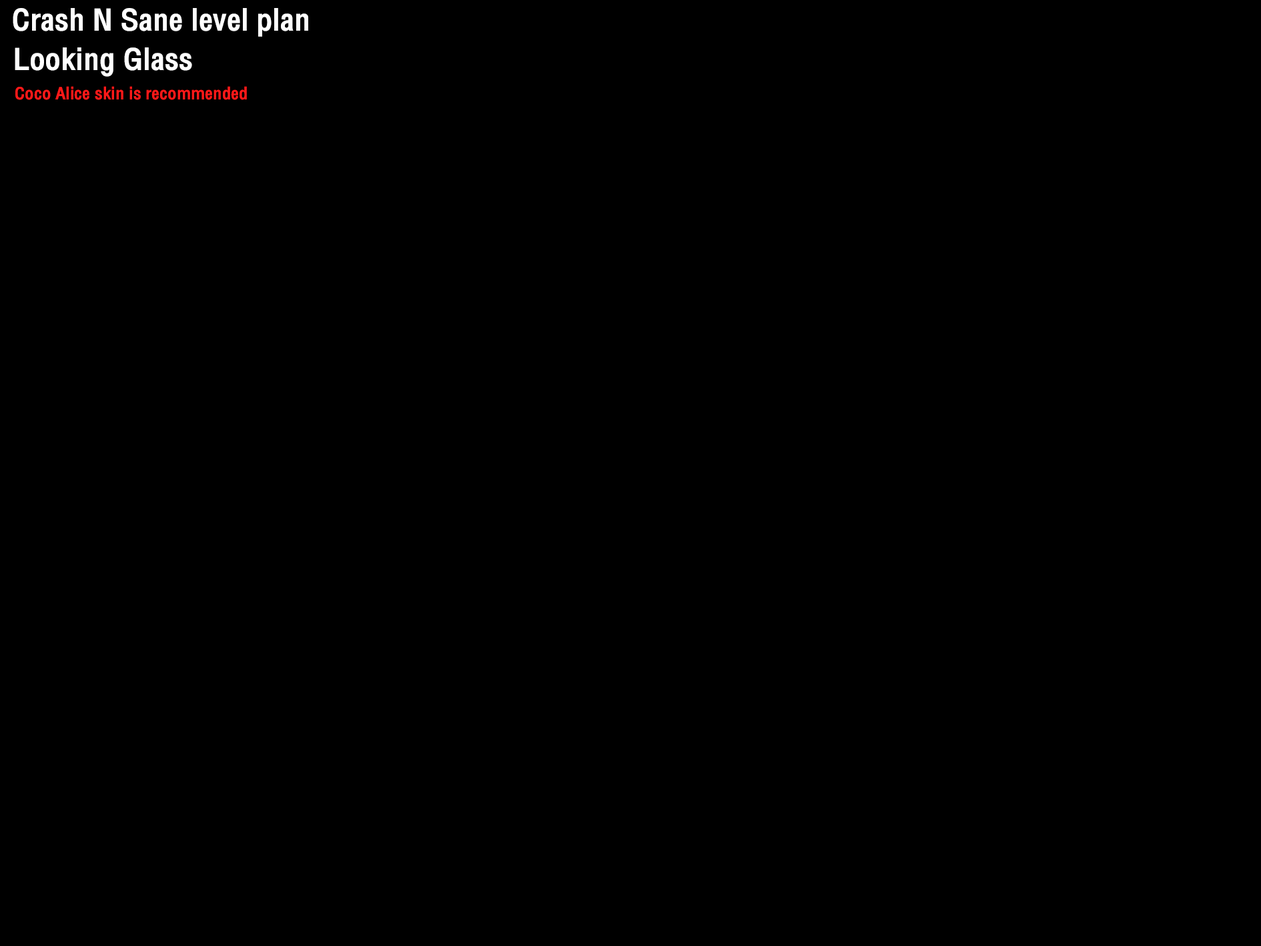
<style>
.page{position:relative;width:1261px;height:946px;background:#000000}
.page>*{position:absolute;margin:0}
.t1{font:44.5px "DBHeavent-BoldCond";color:#ffffff}
.t2{font:25px "DBHeavent-BoldCond";color:#ff1919}
</style>
<div class="page">
<p class="t1" style="left:13px;top:8px;width:295px;height:29px">Crash N Sane level plan</p>
<p class="t1" style="left:15px;top:47px;width:177px;height:30px">Looking Glass</p>
<p class="t2" style="left:15px;top:86px;width:232px;height:14px">Coco Alice skin is recommended</p>
</div>
